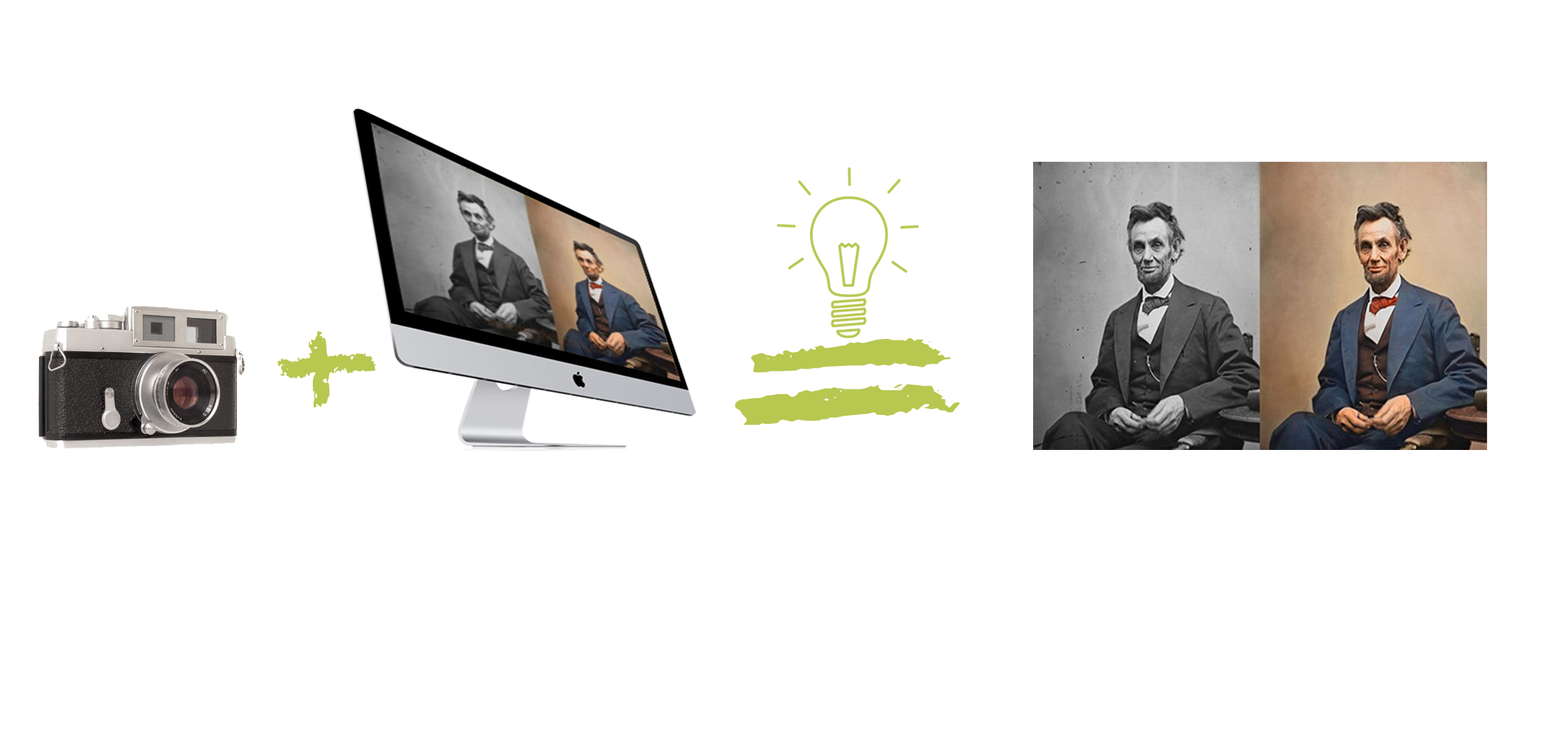
<style>
.page{position:relative;width:1568px;height:735px;background:#ffffff}
.page>*{position:absolute;margin:0}
.t1{font:163.3px "Chalkduster";color:#b8c750}
.t2{font:178.7px "Chalkduster";color:#b8c750;scale:1.92 1}
</style>
<div class="page">
<p class="t1" style="left:278px;top:331px;width:98px;height:77px">+</p>
<p class="t2" style="left:735px;top:338px;width:225px;height:87px">=</p>
</div>
